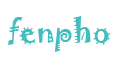
<style>
.page{position:relative;width:116px;height:70px;background:#ffffff}
.page>*{position:absolute;margin:0}
.t1{font:30px "Jokerman-Regular";color:#44bdbf}
</style>
<div class="page">
<p class="t1" style="left:8px;top:16px;width:103px;height:36px">fenpho</p>
</div>
